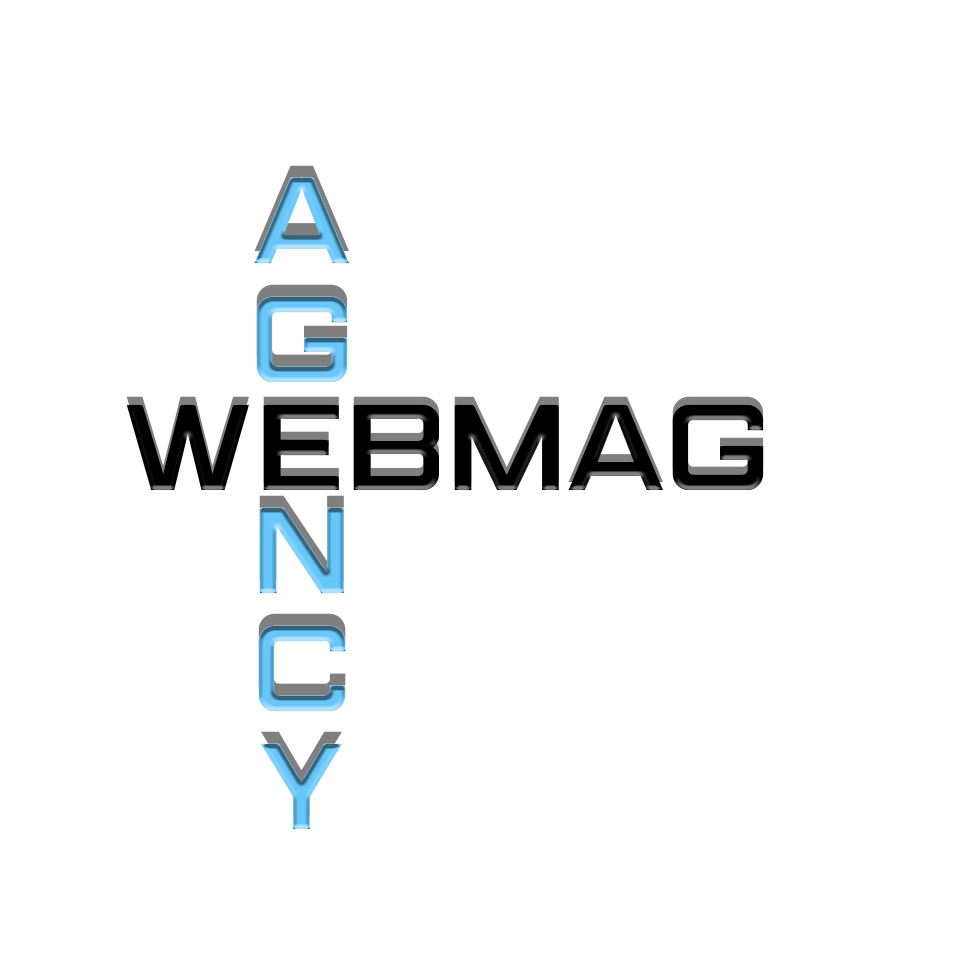
<style>
.page{position:relative;width:980px;height:980px;background:#ffffff}
.page>*{position:absolute;margin:0}
.t1{font:122.5px "MarsekDemi";letter-spacing:-0.035em}
.t2{font:122.5px "MarsekDemi";letter-spacing:-0.035em;color:#000000}
</style>
<div class="page">
<p class="t1" style="left:254px;top:177px;width:95px;height:652px;text-align:center">Ag  ncy</p>
<p class="t2" style="left:126px;top:404px;width:638px;height:86px">Webmag</p>
</div>
